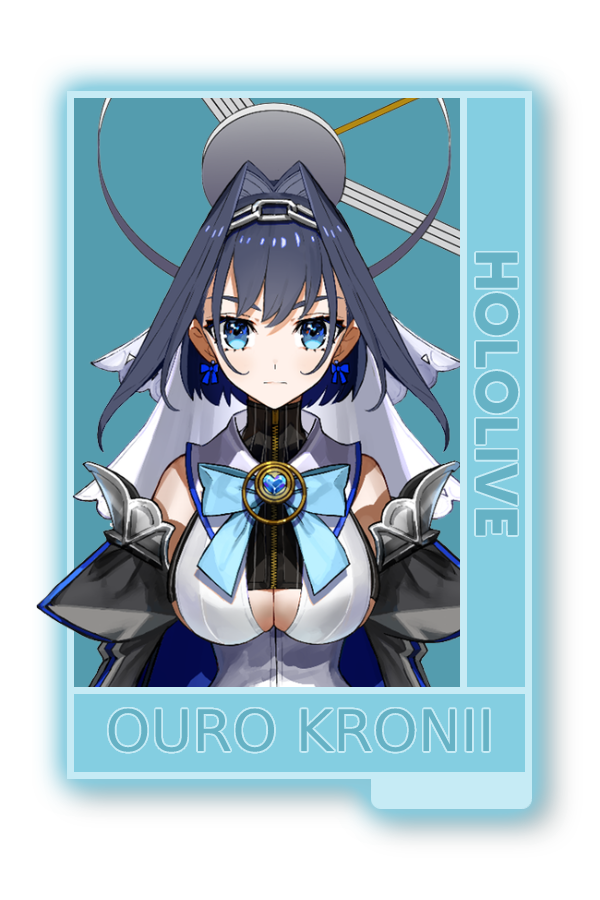
<style>
.page{position:relative;width:600px;height:900px;background:#ffffff}
.page>*{position:absolute;margin:0}
.t1{font:59.2px "MADETOMMY-Bold";color:#66b2c5}
.t2{font:57.3px "CoolveticaRg-Regular";color:#66b2c5}
</style>
<div class="page">
<p class="t1" style="left:475px;top:252px;width:44px;height:284px;rotate:90deg">HOLOLIVE</p>
<p class="t2" style="left:108px;top:708px;width:381px;height:44px">OURO KRONII</p>
</div>
